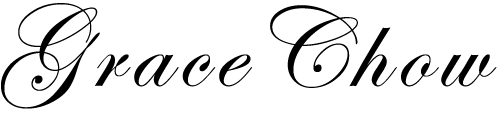
<style>
.page{position:relative;width:498px;height:113px;background:#ffffff}
.page>*{position:absolute;margin:0}
.t1{font:115px "EdwardianScriptITC";letter-spacing:0.075em;color:#000000}
</style>
<div class="page">
<p class="t1" style="left:1px;top:3px;width:496px;height:106px">GraceChow</p>
</div>
